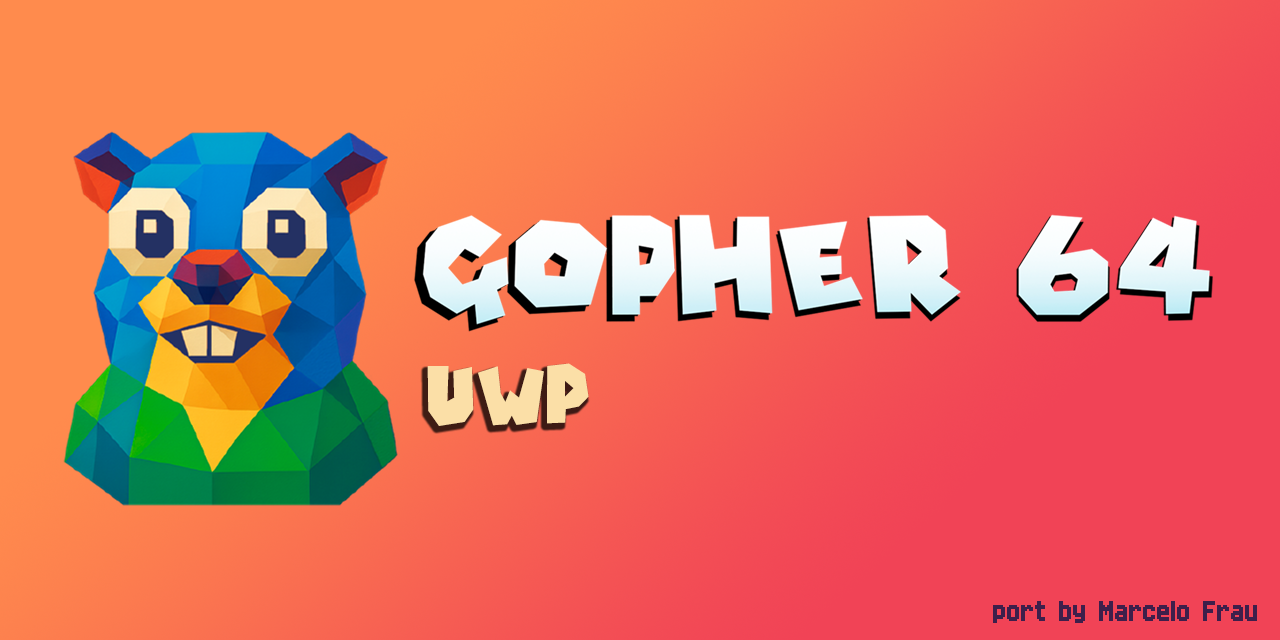
<style>
.page{position:relative;width:1280px;height:640px}
.page>*{position:absolute;margin:0}
.t1{font:60px "TypefaceMario64";color:#fbdfa8}
.t2{font:30px "Mini Pixel-7";color:#3e1f4b}
</style>
<div class="page">
<p class="t1" style="left:427px;top:363px;width:162px;height:63px">UWP</p>
<p class="t2" style="left:993px;top:601px;width:264px;height:22px">port by Marcelo Frau</p>
</div>
